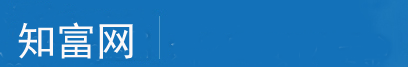
<style>
.page{position:relative;width:408px;height:67px;background:#1371b9}
.page>*{position:absolute;margin:0}
.t1{font:40px "SimHei";color:#fcf9f9}
</style>
<div class="page">
<p class="t1" style="left:18px;top:22px;width:115px;height:37px">知富网</p>
</div>
